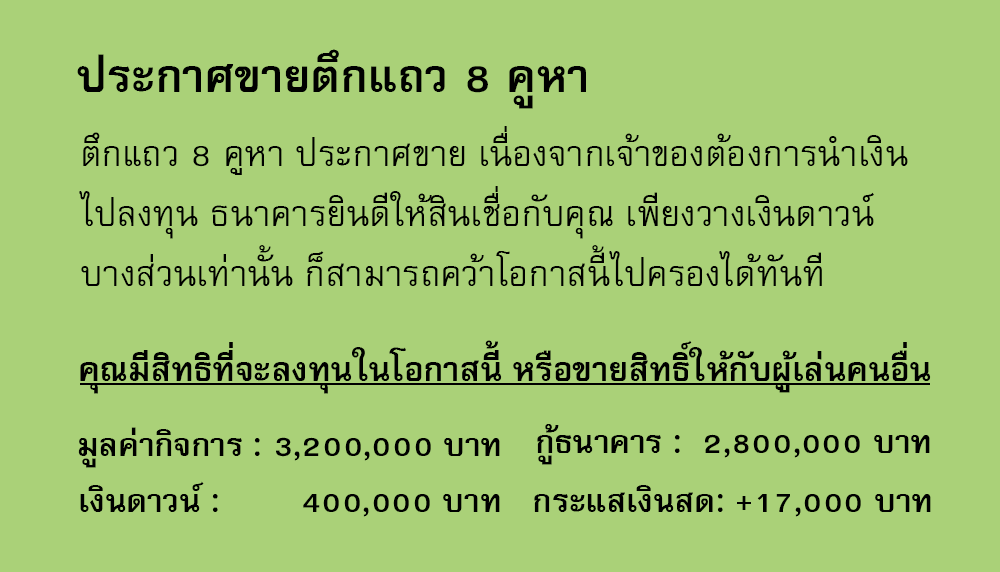
<style>
.page{position:relative;width:1000px;height:572px;background:#aad178}
.page>*{position:absolute;margin:0}
.t1{font:64px "FreesiaUPCBold";color:#000000}
.t2{font:50px/60px "FreesiaUPC";color:#000000}
.t3{font:47px "FreesiaUPCBold";color:#000000}
.t4{font:45px "FreesiaUPCBold";color:#000000}
</style>
<div class="page">
<p class="t1" style="left:77px;top:49px;width:509px;height:60px">ประกาศขายตึกแถว 8 คูหา</p>
<p class="t2" style="left:79px;top:126px;width:829px;height:160px">ตึกแถว 8 คูหา ประกาศขาย เนื่องจากเจ้าของต้องการนำเงิน<br>ไปลงทุน ธนาคารยินดีให้สินเชื่อกับคุณ เพียงวางเงินดาวน์<br>บางส่วนเท่านั้น ก็สามารถคว้าโอกาสนี้ไปครองได้ทันที</p>
<p class="t3" style="left:80px;top:340px;width:851px;height:54px">คุณมีสิทธิที่จะลงทุนในโอกาสนี้ หรือขายสิทธิ์ให้กับผู้เล่นคนอื่น</p>
<p class="t4" style="left:537px;top:424px;width:393px;height:41px">กู้ธนาคาร :  2,800,000 บาท</p>
<p class="t4" style="left:78px;top:427px;width:422px;height:41px">มูลค่ากิจการ : 3,200,000 บาท</p>
<p class="t4" style="left:80px;top:481px;width:420px;height:36px">เงินดาวน์ :        400,000 บาท</p>
<p class="t4" style="left:534px;top:485px;width:397px;height:32px">กระแสเงินสด: +17,000 บาท</p>
</div>
